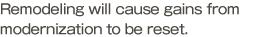
<style>
.page{position:relative;width:253px;height:37px;background:#ffffff}
.page>*{position:absolute;margin:0}
.t1{font:14px/20px "GothicMB101Pro-Medium";letter-spacing:-0.04em;color:#4c4943}
</style>
<div class="page">
<p class="t1" style="left:0px;top:3px;width:239px;height:32px">Remodeling will cause gains from<br>modernization to be reset.</p>
</div>
